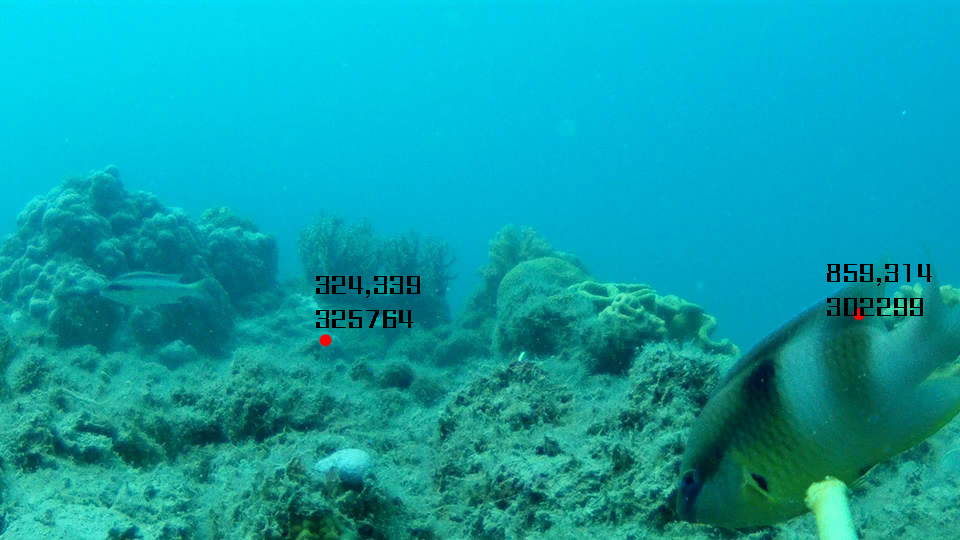
<style>
.page{position:relative;width:960px;height:540px}
.page>*{position:absolute;margin:0}
.t1{font:24px/17px "HYRuiZhiW";letter-spacing:0.03em;color:#000000}
</style>
<div class="page">
<p class="t1" style="left:827px;top:264px;width:105px;height:52px">859,314<br><br>302299</p>
<p class="t1" style="left:316px;top:276px;width:104px;height:52px">324,339<br><br>325764</p>
</div>
